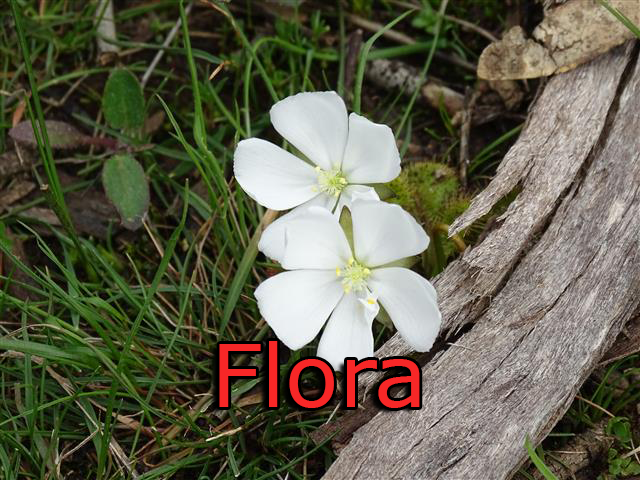
<style>
.page{position:relative;width:640px;height:480px}
.page>*{position:absolute;margin:0}
.t1{font:87.4px "Verdana";color:#f72727}
</style>
<div class="page">
<p class="t1" style="left:219px;top:341px;width:201px;height:67px">Flora</p>
</div>
